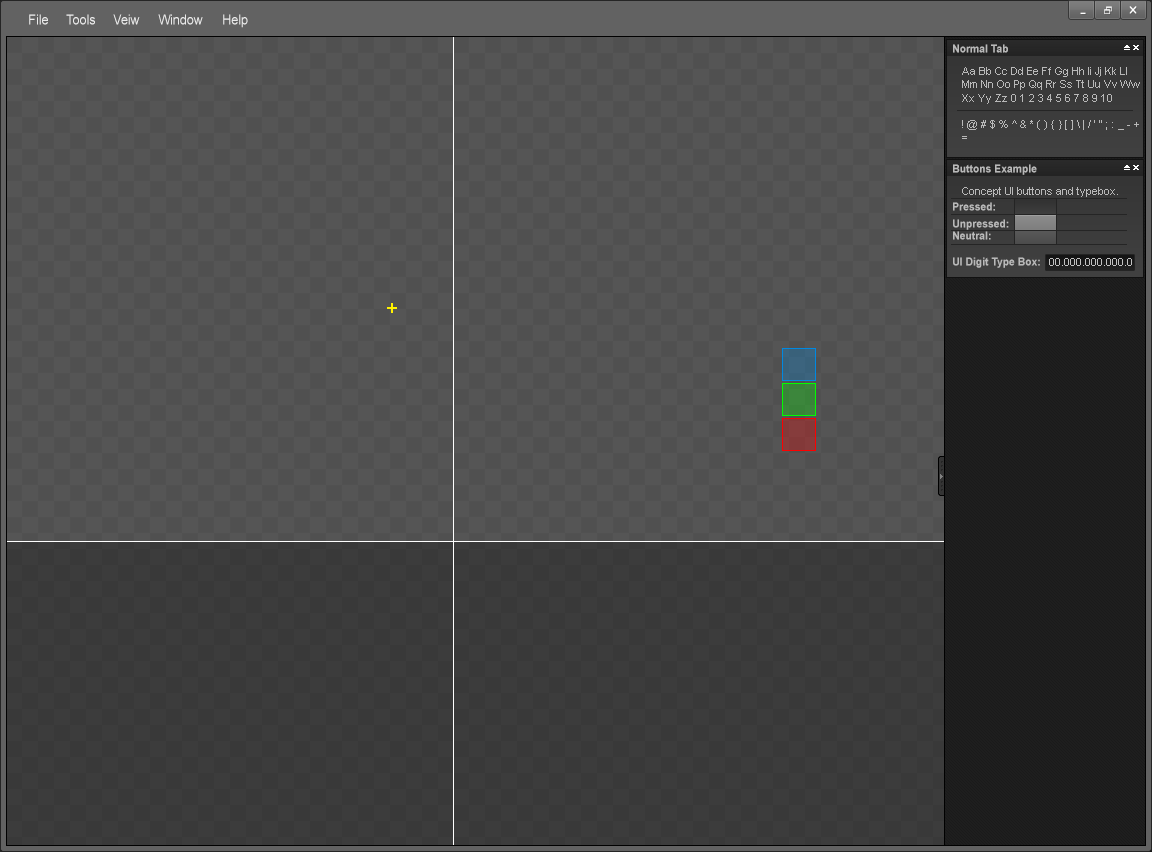
<style>
.page{position:relative;width:1152px;height:852px;background:#555555}
.page>*{position:absolute;margin:0}
.t1{font:14px "ArialMT";color:#ebebeb;scale:0.89 1}
.t2{font:11px "Arial-BoldMT";color:#b9b9b9;scale:0.94 1}
.t3{font:11px "ArialMT";color:#b9b9b9}
.t4{font:11px "ArialMT";color:#c2c2c2}
</style>
<div class="page">
<p class="t1" style="left:29px;top:14px;width:19px;height:11px">File</p>
<p class="t1" style="left:66px;top:14px;width:29px;height:11px">Tools</p>
<p class="t1" style="left:113px;top:14px;width:27px;height:11px">Veiw</p>
<p class="t1" style="left:158px;top:14px;width:45px;height:11px">Window</p>
<p class="t1" style="left:223px;top:14px;width:25px;height:14px">Help</p>
<p class="t2" style="left:953px;top:44px;width:55px;height:9px">Normal Tab</p>
<p class="t3" style="left:962px;top:67px;width:178px;height:72px">Aa Bb Cc Dd Ee Ff Gg Hh Ii Jj Kk Ll <br>Mm Nn Oo Pp Qq Rr Ss Tt Uu Vv Ww<br>Xx Yy Zz 0 1 2 3 4 5 6 7 8 9 10<br><br>! @ # $ % ^ &amp; * ( ) { } [ ] \ | / ’ ” ; : _ - +<br>=</p>
<p class="t2" style="left:953px;top:164px;width:84px;height:11px">Buttons Example</p>
<p class="t3" style="left:962px;top:187px;width:156px;height:10px">Concept UI buttons and typebox.</p>
<p class="t2" style="left:953px;top:202px;width:42px;height:9px">Pressed:</p>
<p class="t2" style="left:953px;top:219px;width:56px;height:11px">Unpressed:</p>
<p class="t2" style="left:953px;top:231px;width:38px;height:9px">Neutral:</p>
<p class="t2" style="left:953px;top:257px;width:87px;height:11px">UI Digit Type Box:</p>
<p class="t4" style="left:1049px;top:258px;width:83px;height:8px">00.000.000.000.0</p>
</div>
